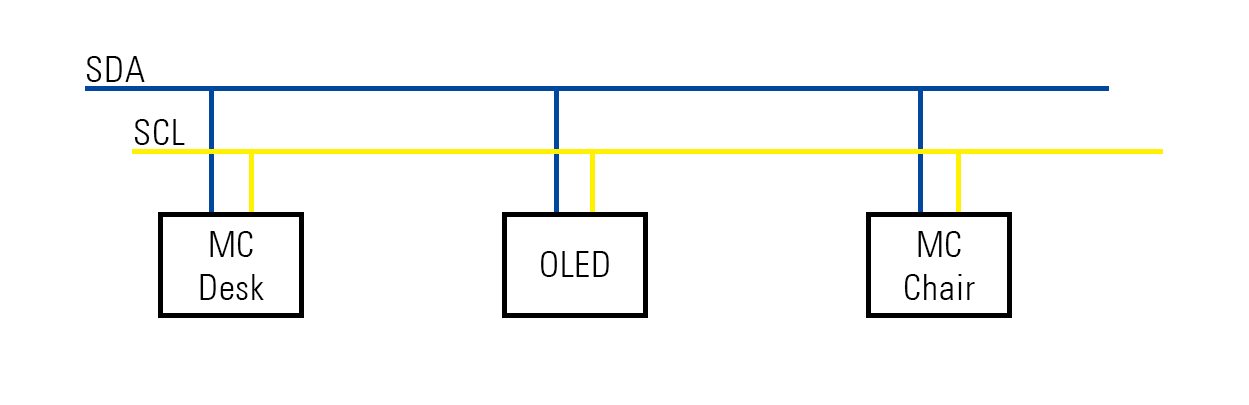
<style>
.page{position:relative;width:1249px;height:405px;background:#ffffff}
.page>*{position:absolute;margin:0}
.t1{font:36px "UniversLT-CondensedLight";letter-spacing:0.025em;color:#000000}
</style>
<div class="page">
<p class="t1" style="left:86px;top:56px;width:59px;height:26px">SDA</p>
<p class="t1" style="left:134px;top:119px;width:51px;height:26px">SCL</p>
<p class="t1" style="left:200px;top:231px;width:64px;height:69px;text-align:center">MC<br>Desk</p>
<p class="t1" style="left:904px;top:231px;width:71px;height:69px;text-align:center">MC<br>Chair</p>
<p class="t1" style="left:541px;top:251px;width:68px;height:26px">OLED</p>
</div>
